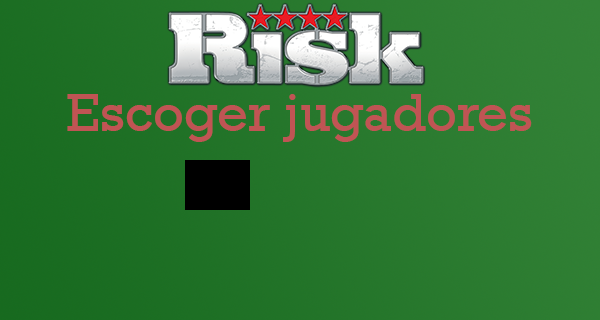
<style>
.page{position:relative;width:600px;height:320px}
.page>*{position:absolute;margin:0}
.t1{font:54.2px "Rockwell";color:#c05454}
</style>
<div class="page">
<p class="t1" style="left:67px;top:94px;width:465px;height:48px">Escoger jugadores</p>
</div>
